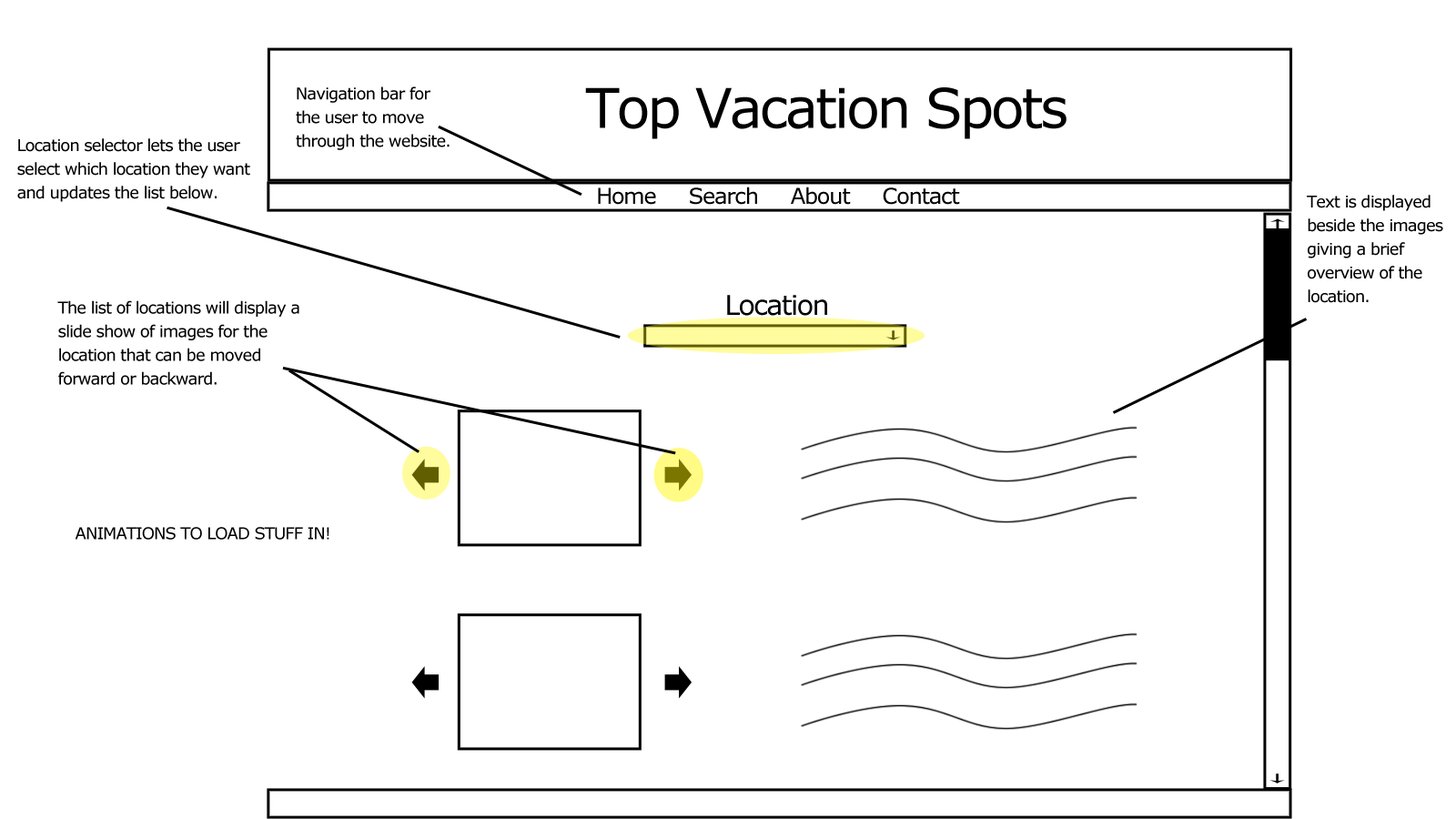
<style>
.page{position:relative;width:1456px;height:819px;background:#ffffff}
.page>*{position:absolute;margin:0}
.t1{font:16.4px/23.7px "Verdana";letter-spacing:-0.05em;color:#000000}
.t2{font:54.6px "Verdana";letter-spacing:-0.05em;color:#000000}
.t3{font:21.8px "Verdana";letter-spacing:-0.05em;color:#000000}
.t4{font:27.3px "Verdana";letter-spacing:-0.05em;color:#000000}
.t5{font:16.4px "Verdana";letter-spacing:-0.05em;color:#000000}
</style>
<div class="page">
<p class="t1" style="left:296px;top:86px;width:154px;height:64px">Navigation bar for <br>the user to move <br>through the website.</p>
<p class="t2" style="left:585px;top:87px;width:482px;height:52px">Top Vacation Spots</p>
<p class="t1" style="left:17px;top:138px;width:233px;height:64px">Location selector lets the user <br>select which location they want <br>and updates the list below.</p>
<p class="t3" style="left:598px;top:187px;width:362px;height:18px">Home     Search     About     Contact</p>
<p class="t1" style="left:1307px;top:195px;width:136px;height:108px">Text is displayed <br>beside the images <br>giving a brief <br>overview of the <br>location.</p>
<p class="t1" style="left:57px;top:300px;width:242px;height:85px">The list of locations will display a <br>slide show of images for the <br>location that can be moved <br>forward or backward.</p>
<p class="t4" style="left:727px;top:295px;width:100px;height:21px">Location</p>
<p class="t5" style="left:75px;top:527px;width:254px;height:13px">ANIMATIONS TO LOAD STUFF IN!</p>
</div>
